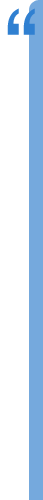
<style>
.page{position:relative;width:43px;height:500px;background:#ffffff}
.page>*{position:absolute;margin:0}
.t1{font:84.4px "GenevaCY";color:#3080d1}
</style>
<div class="page">
<p class="t1" style="left:7px;top:8px;width:28px;height:27px">“</p>
</div>
